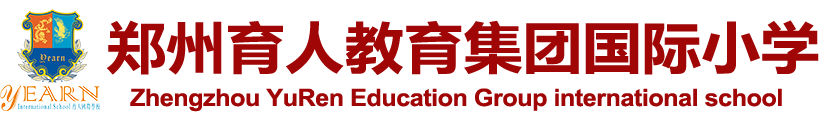
<style>
.page{position:relative;width:830px;height:122px;background:#ffffff}
.page>*{position:absolute;margin:0}
.t1{font:55px "MicrosoftYaHei-Bold";letter-spacing:0.01em;color:#a00606;scale:1.07 1}
.t2{font:24px "Arial-BoldMT";letter-spacing:-0.02em;color:#a00606;scale:1.05 1}
</style>
<div class="page">
<p class="t1" style="left:107px;top:20px;width:712px;height:55px">郑州育人教育集团国际小学</p>
<p class="t2" style="left:130px;top:88px;width:652px;height:24px">Zhengzhou YuRen Education Group international school</p>
</div>
